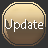
<style>
.page{position:relative;width:48px;height:48px;background:#333333}
.page>*{position:absolute;margin:0}
.t1{font:14px "MyriadPro-Regular";color:#ffffff;scale:0.95 1}
</style>
<div class="page">
<p class="t1" style="left:5px;top:19px;width:38px;height:13px">Update</p>
</div>
